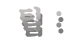
<style>
.page{position:relative;width:65px;height:40px;background:#ffffff}
.page>*{position:absolute;margin:0}
.t1{font:26.9px "SDKukdetopokki-bBd";letter-spacing:0.08em}
</style>
<div class="page">
<p class="t1" style="left:19px;top:6px;width:43px;height:25px">팁 :</p>
</div>
